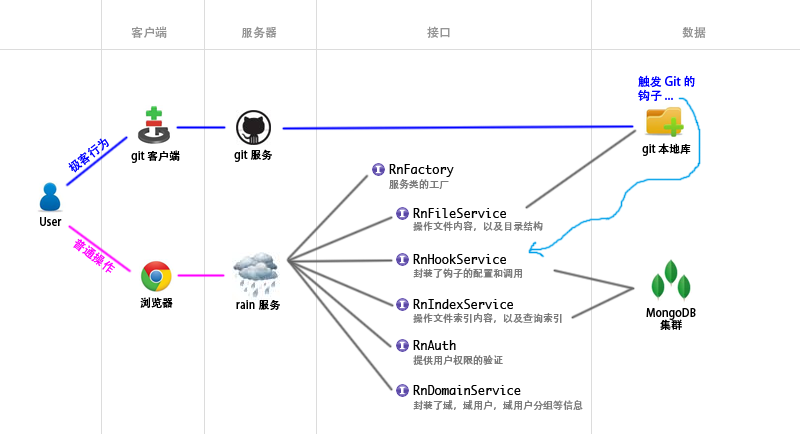
<style>
.page{position:relative;width:800px;height:434px;background:#ffffff}
.page>*{position:absolute;margin:0}
.t1{font:12px "AdobeHeitiStd-Regular";color:#959595}
.t2{font:12px/14px "AdobeHeitiStd-Regular";color:#0000ff}
.t3{font:12px "AdobeHeitiStd-Regular";color:#0000ff}
.t4{font:11px "AdobeHeitiStd-Regular";color:#000000}
.t5{font:12px "Monaco";color:#000000}
.t6{font:10px "AdobeHeitiStd-Regular";color:#7c7c7c}
.t7{font:12px "AdobeHeitiStd-Regular";color:#ff00ff}
.t8{font:11px/12px "AdobeHeitiStd-Regular";color:#000000}
</style>
<div class="page">
<p class="t1" style="left:131px;top:26px;width:36px;height:13px">客户端</p>
<p class="t1" style="left:241px;top:26px;width:36px;height:13px">服务器</p>
<p class="t1" style="left:427px;top:26px;width:23px;height:12px">接口</p>
<p class="t1" style="left:682px;top:26px;width:24px;height:12px">数据</p>
<p class="t2" style="left:638px;top:75px;width:57px;height:26px">触发 Git 的<br>钩子 ...</p>
<p class="t3" style="left:68px;top:138px;width:41px;height:35px;rotate:-38deg">极客行为</p>
<p class="t4" style="left:131px;top:150px;width:49px;height:13px">git 客户端</p>
<p class="t4" style="left:234px;top:149px;width:38px;height:13px">git 服务</p>
<p class="t4" style="left:642px;top:143px;width:49px;height:13px">git 本地库</p>
<p class="t5" style="left:389px;top:164px;width:65px;height:13px">RnFactory</p>
<p class="t6" style="left:389px;top:179px;width:60px;height:10px">服务类的工厂</p>
<p class="t5" style="left:413px;top:208px;width:93px;height:10px">RnFileService</p>
<p class="t4" style="left:40px;top:217px;width:22px;height:9px">User</p>
<p class="t6" style="left:413px;top:221px;width:130px;height:10px">操作文件内容，以及目录结构</p>
<p class="t7" style="left:73px;top:238px;width:42px;height:35px;rotate:37deg">普通操作</p>
<p class="t5" style="left:413px;top:254px;width:93px;height:10px">RnHookService</p>
<p class="t6" style="left:413px;top:268px;width:109px;height:10px">封装了钩子的配置和调用</p>
<p class="t4" style="left:140px;top:297px;width:33px;height:11px">浏览器</p>
<p class="t4" style="left:236px;top:299px;width:44px;height:11px">rain 服务</p>
<p class="t5" style="left:413px;top:299px;width:100px;height:10px">RnIndexService</p>
<p class="t6" style="left:413px;top:313px;width:149px;height:10px">操作文件索引内容，以及查询索引</p>
<p class="t8" style="left:646px;top:308px;width:50px;height:22px;text-align:center">MongoDB<br>集群</p>
<p class="t5" style="left:413px;top:340px;width:43px;height:10px">RnAuth</p>
<p class="t6" style="left:413px;top:355px;width:90px;height:10px">提供用户权限的验证</p>
<p class="t5" style="left:413px;top:385px;width:108px;height:10px">RnDomainService</p>
<p class="t6" style="left:413px;top:400px;width:170px;height:10px">封装了域，域用户，域用户分组等信息</p>
</div>
